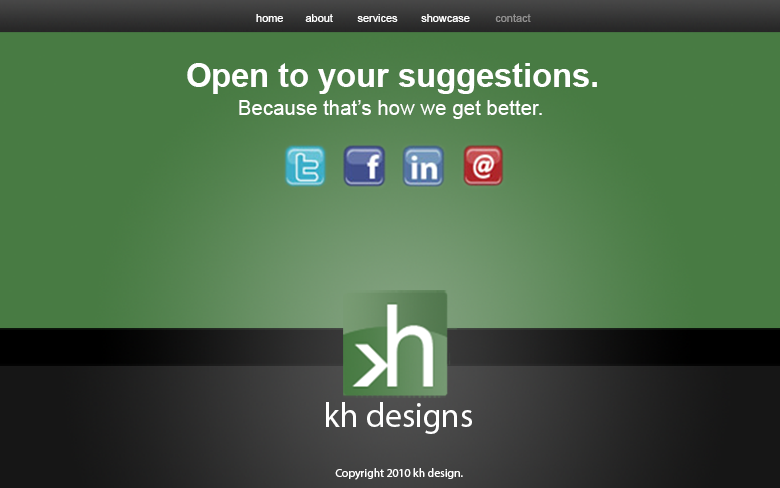
<style>
.page{position:relative;width:780px;height:488px;background:#487b43}
.page>*{position:absolute;margin:0}
.t1{font:11px "ArialMT";color:#ffffff}
.t2{font:11px "ArialMT";color:#919090}
.t3{font:32.7px "Arial-BoldMT";color:#ffffff}
.t4{font:19.8px "ArialMT";color:#ffffff;scale:1.03 1}
.t5{font:34.7px "MyriadPro-Regular";color:#ffffff;scale:0.97 1}
.t6{font:11.7px "MyriadPro-Regular";color:#ffffff}
</style>
<div class="page">
<p class="t1" style="left:256px;top:14px;width:27px;height:8px">home</p>
<p class="t1" style="left:305px;top:14px;width:28px;height:8px">about</p>
<p class="t1" style="left:357px;top:14px;width:41px;height:8px">services</p>
<p class="t1" style="left:421px;top:14px;width:49px;height:8px">showcase</p>
<p class="t2" style="left:495px;top:14px;width:36px;height:8px">contact</p>
<p class="t3" style="left:187px;top:63px;width:410px;height:31px">Open to your suggestions.</p>
<p class="t4" style="left:239px;top:100px;width:303px;height:19px">Because that’s how we get better.</p>
<p class="t5" style="left:326px;top:402px;width:146px;height:32px">kh designs</p>
<p class="t6" style="left:335px;top:468px;width:128px;height:12px">Copyright 2010 kh design.</p>
</div>
